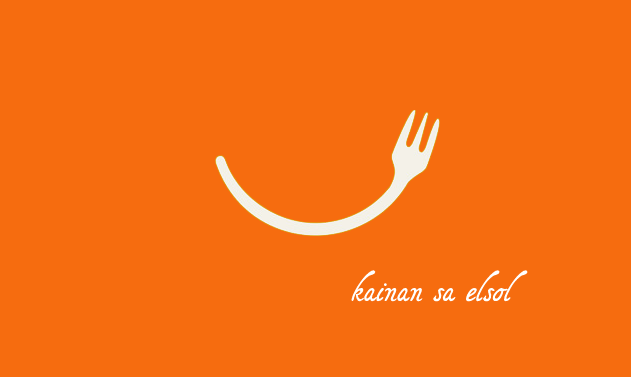
<style>
.page{position:relative;width:631px;height:377px;background:#f66c0f}
.page>*{position:absolute;margin:0}
.t1{font:30px "Tagettes";color:#ffffff}
</style>
<div class="page">
<p class="t1" style="left:351px;top:270px;width:177px;height:32px">kainan sa elsol</p>
</div>
